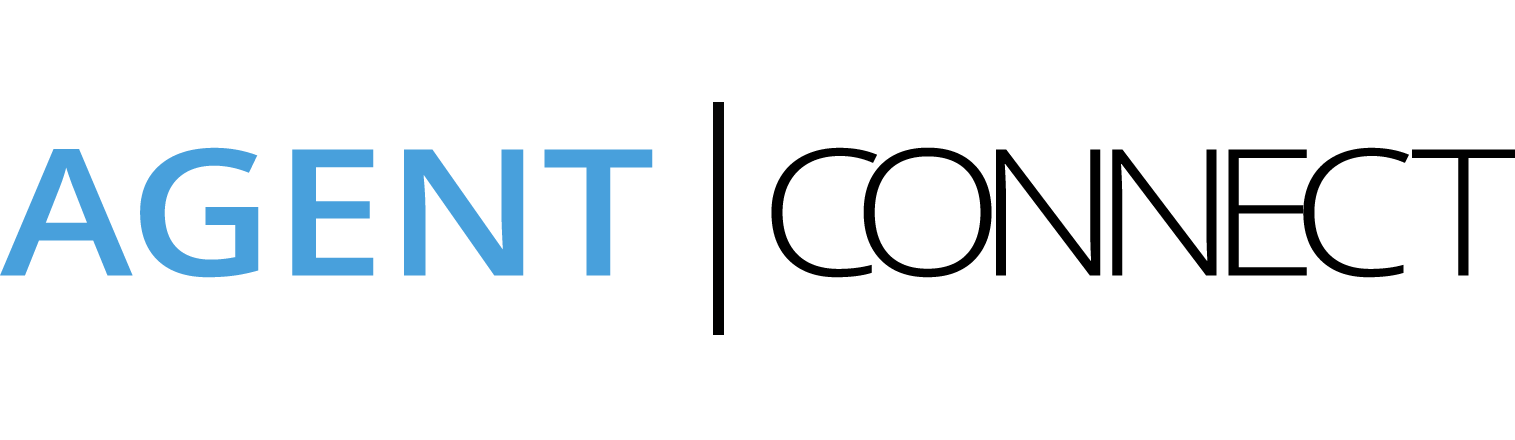
<style>
.page{position:relative;width:1515px;height:440px;background:#ffffff}
.page>*{position:absolute;margin:0}
.t1{font:176px "OpenSans-Light";letter-spacing:-0.14em;color:#000000;scale:1.14 1}
.t2{font:176px "OpenSans-Semibold";color:#48a0dc;scale:1.14 1}
</style>
<div class="page">
<p class="t1" style="left:0px;top:147px;width:1515px;height:131px"><span class="t2">AGENT  </span>CONNEC T</p>
</div>
